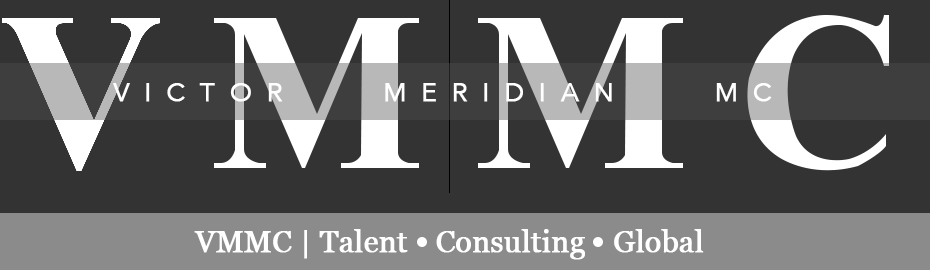
<style>
.page{position:relative;width:930px;height:270px;background:#333333}
.page>*{position:absolute;margin:0}
.t1{font:26px "AvenirNext-Regular";letter-spacing:0.55em;color:#ffffff;font-weight:bold}
.t2{font:29.5px "Georgia";color:#ffffff;font-weight:bold}
</style>
<div class="page">
<p class="t1" style="left:113px;top:83px;width:659px;height:19px">VICTOR    MERIDIAN    MC</p>
<p class="t2" style="left:194px;top:229px;width:214px;height:30px">VMMC | Talent</p>
<p class="t2" style="left:436px;top:229px;width:149px;height:31px">Consulting</p>
<p class="t2" style="left:614px;top:229px;width:90px;height:24px">Global</p>
</div>
